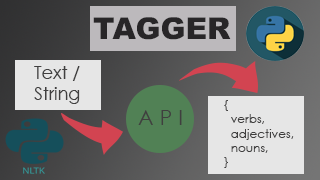
<style>
.page{position:relative;width:320px;height:180px}
.page>*{position:absolute;margin:0}
.t1{font:30.1px "Arial-Black";color:#282628}
.t2{font:18.2px "CenturyGothic";color:#403f3f;scale:0.97 1}
.t3{font:12px "CenturyGothic";color:#403f3f}
</style>
<div class="page">
<p class="t1" style="left:93px;top:17px;width:138px;height:23px">TAGGER</p>
<p class="t2" style="left:34px;top:66px;width:46px;height:38px">Text / String</p>
<p class="t3" style="left:224px;top:100px;width:70px;height:68px">{<br>  verbs,<br>  adjectives,<br>  nouns,<br>}<br>}</p>
</div>
